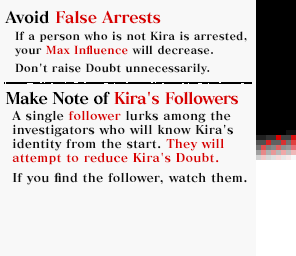
<style>
.page{position:relative;width:296px;height:256px;background:#f8f8f8}
.page>*{position:absolute;margin:0}
.t1{font:16px/81px "MatissePro-EB";letter-spacing:-0.05em;color:#d80000}
.t2{font:16px/81px "MatissePro-EB";letter-spacing:-0.025em;color:#000000}
.t3{font:16px/81px "MatissePro-EB";letter-spacing:-0.025em;color:#d80000}
.t4{font:16px/81px "MatissePro-EB";letter-spacing:-0.05em;color:#000000}
.t5{font:11px/14px "MatissePro-EB";letter-spacing:0.01em;color:#101010}
.t6{font:11px/14px "MatissePro-EB";letter-spacing:0.01em;color:#d80000}
.t7{font:12px/14px "MatissePro-EB";letter-spacing:0.01em;color:#101010}
.t8{font:12px/14px "MatissePro-EB";letter-spacing:0.01em;color:#d80000}
</style>
<div class="page">
<p class="t1" style="left:4px;top:10px;width:234px;height:95px"><span class="t2">Avoid </span><span class="t3">False Arrests<br></span><span class="t4">Make Note of</span> Kira's Followers</p>
<p class="t5" style="left:14px;top:31px;width:233px;height:44px">If a person who is not Kira is arrested,<br>your <span class="t6">Max Influence</span> will decrease.<br> <br>Don't raise Doubt unnecessarily.</p>
<p class="t7" style="left:11px;top:110px;width:236px;height:75px">A single <span class="t8">follower</span> lurks among the<br>investigators who will know Kira's<br>identity from the start. <span class="t8">They will<br>attempt to reduce Kira's Doubt.<br> <br></span>If you find the follower, watch them.</p>
</div>
